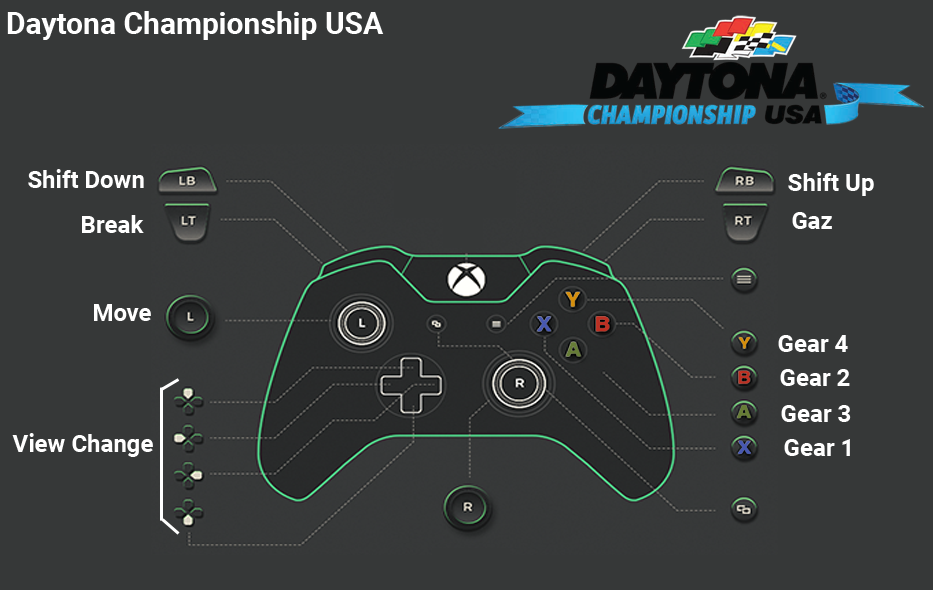
<style>
.page{position:relative;width:933px;height:590px;background:#363838}
.page>*{position:absolute;margin:0}
.t1{font:30px "Roboto-Bold";color:#ffffff}
.t2{font:24px "Roboto-Bold";color:#ffffff}
</style>
<div class="page">
<p class="t1" style="left:7px;top:11px;width:377px;height:29px">Daytona Championship USA</p>
<p class="t2" style="left:28px;top:169px;width:116px;height:19px">Shift Down</p>
<p class="t2" style="left:788px;top:172px;width:86px;height:24px">Shift Up</p>
<p class="t2" style="left:82px;top:215px;width:62px;height:18px">Break</p>
<p class="t2" style="left:792px;top:212px;width:40px;height:17px">Gaz</p>
<p class="t2" style="left:94px;top:304px;width:57px;height:17px">Move</p>
<p class="t2" style="left:778px;top:335px;width:70px;height:17px">Gear 4</p>
<p class="t2" style="left:780px;top:369px;width:70px;height:17px">Gear 2</p>
<p class="t2" style="left:781px;top:405px;width:70px;height:17px">Gear 3</p>
<p class="t2" style="left:12px;top:433px;width:141px;height:24px">View Change</p>
<p class="t2" style="left:784px;top:439px;width:66px;height:17px">Gear 1</p>
</div>
